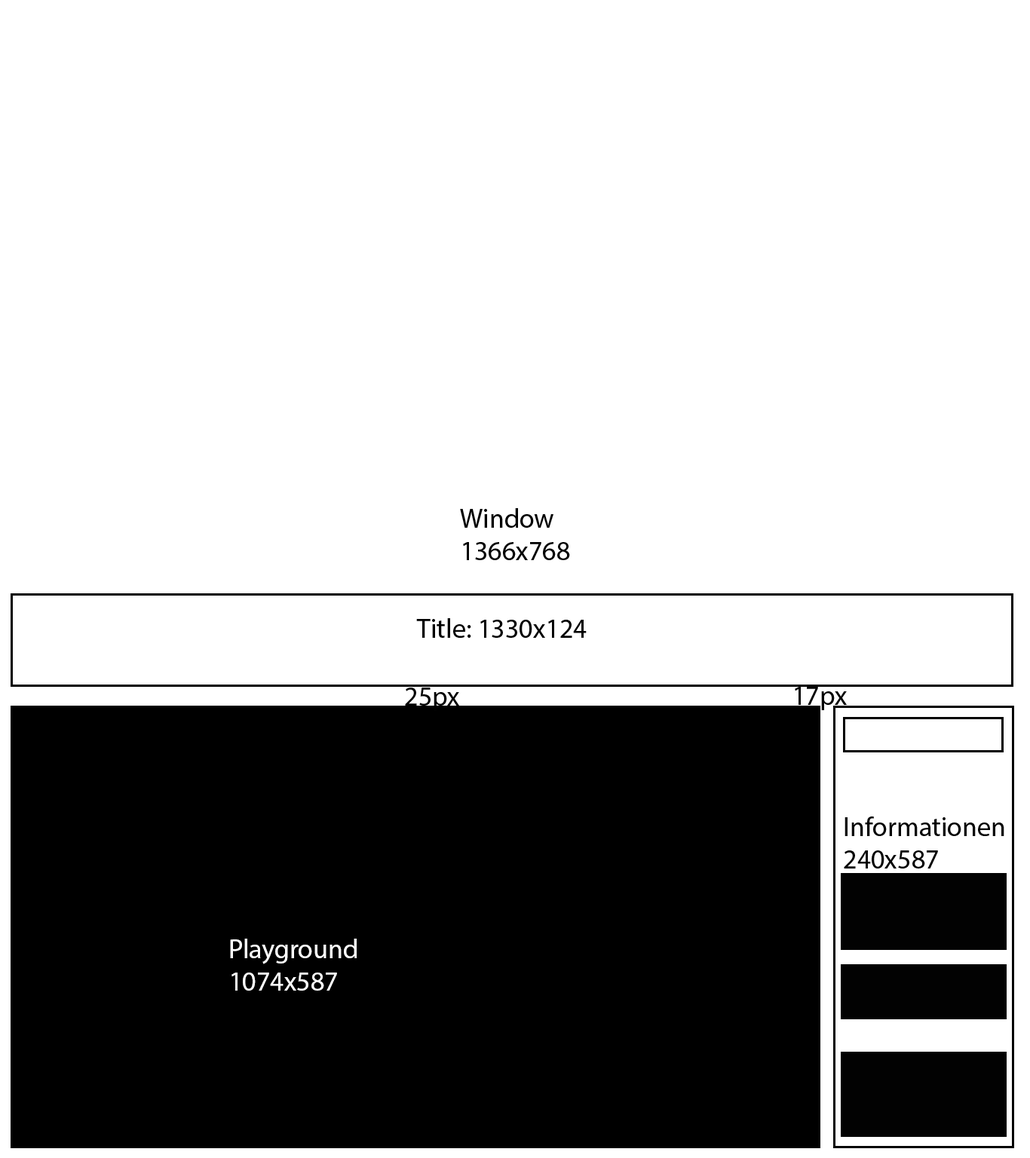
<style>
.page{position:relative;width:1030px;height:1158px;background:#ffffff}
.page>*{position:absolute;margin:0}
.t1{font:27.1px "MyriadPro-Regular";color:#000000}
.t2{font:27.1px "MyriadPro-Regular";color:#020202}
.t3{font:27.1px "MyriadPro-Regular";color:#ffffff}
</style>
<div class="page">
<p class="t1" style="left:460px;top:508px;width:110px;height:52px">Window<br>1366x768</p>
<p class="t1" style="left:416px;top:618px;width:171px;height:20px">Title: 1330x124</p>
<p class="t2" style="left:405px;top:688px;width:54px;height:23px">25px</p>
<p class="t2" style="left:795px;top:687px;width:52px;height:23px">17px</p>
<p class="t2" style="left:844px;top:816px;width:160px;height:52px">Informationen<br>240x587</p>
<p class="t3" style="left:230px;top:939px;width:127px;height:52px">Playground<br>1074x587</p>
</div>
